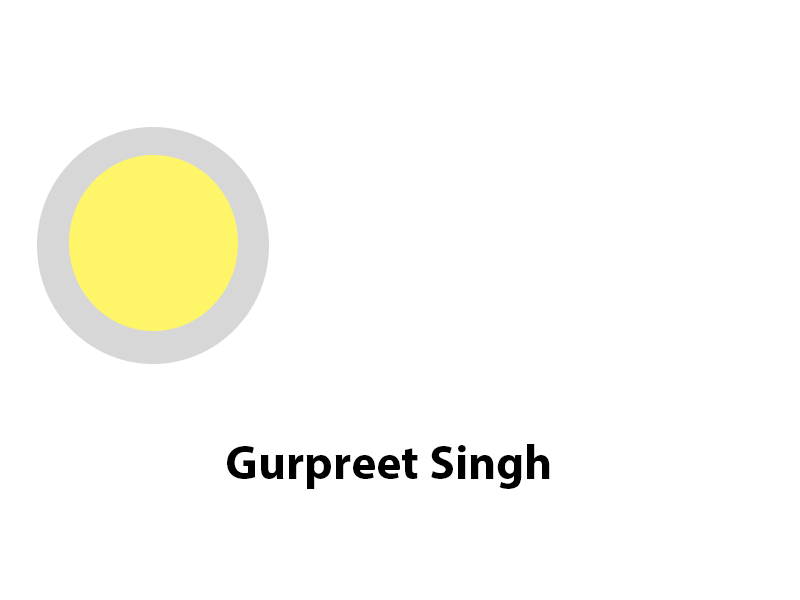
<style>
.page{position:relative;width:800px;height:600px;background:#ffffff}
.page>*{position:absolute;margin:0}
.t1{font:48px "MyriadPro-Bold";color:#000000}
</style>
<div class="page">
<p class="t1" style="left:227px;top:444px;width:323px;height:45px">Gurpreet Singh</p>
</div>
